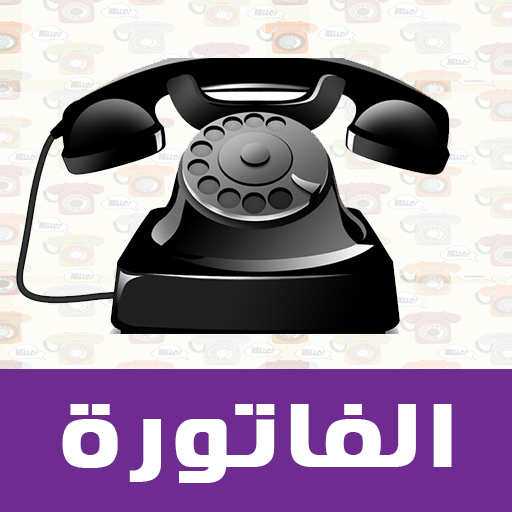
<style>
.page{position:relative;width:512px;height:512px;background:#6f2c90}
.page>*{position:absolute;margin:0}
.t1{font:90px "HacenSaudiArabiaXL";letter-spacing:0.06em;color:#ffffff}
</style>
<div class="page">
<p class="t1" style="left:62px;top:404px;width:390px;height:79px">الفاتورة</p>
</div>
